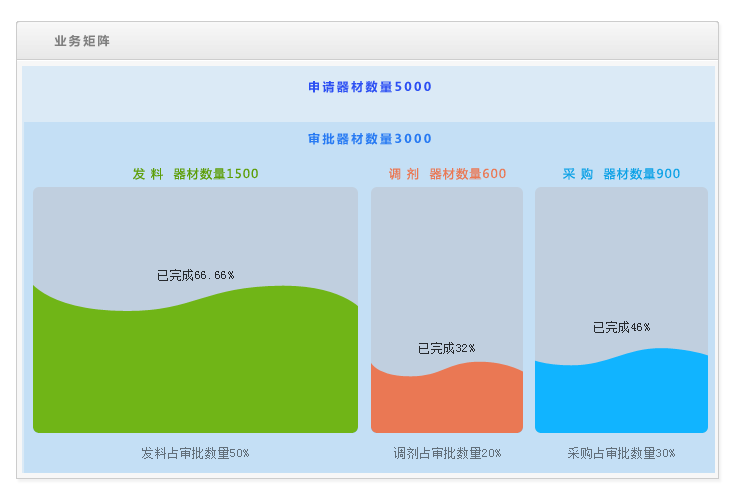
<style>
.page{position:relative;width:739px;height:500px;background:#c0cfdf}
.page>*{position:absolute;margin:0}
.t1{font:12px "MicrosoftYaHei-Bold";letter-spacing:0.2em;color:#7f7f7f}
.t2{font:12px "MicrosoftYaHei-Bold";letter-spacing:0.2em;color:#2c4ff3}
.t3{font:12px "MicrosoftYaHei-Bold";letter-spacing:0.2em;color:#277af3}
.t4{font:12px "MicrosoftYaHei";letter-spacing:0.1em;color:#5d9e09}
.t5{font:12px "MicrosoftYaHei";letter-spacing:0.1em;color:#ea7854}
.t6{font:12px "MicrosoftYaHei";letter-spacing:0.1em;color:#0ea2e6}
.t7{font:12px "SimSun";letter-spacing:0.05em;color:#26292d}
.t8{font:12px "SimSun";letter-spacing:0.05em;color:#626f7a}
</style>
<div class="page">
<p class="t1" style="left:54px;top:34px;width:56px;height:13px">业务矩阵</p>
<p class="t2" style="left:309px;top:80px;width:122px;height:13px">申请器材数量5000</p>
<p class="t3" style="left:308px;top:132px;width:123px;height:13px">审批器材数量3000</p>
<p class="t4" style="left:133px;top:167px;width:125px;height:13px">发 料  器材数量1500</p>
<p class="t5" style="left:389px;top:167px;width:117px;height:13px">调 剂  器材数量600</p>
<p class="t6" style="left:563px;top:168px;width:117px;height:12px">采 购  器材数量900</p>
<p class="t7" style="left:158px;top:269px;width:76px;height:12px">已完成66.66%</p>
<p class="t7" style="left:594px;top:321px;width:56px;height:12px">已完成46%</p>
<p class="t7" style="left:419px;top:342px;width:56px;height:12px">已完成32%</p>
<p class="t8" style="left:142px;top:447px;width:107px;height:12px">发料占审批数量50%</p>
<p class="t8" style="left:394px;top:447px;width:107px;height:12px">调剂占审批数量20%</p>
<p class="t8" style="left:568px;top:447px;width:107px;height:12px">采购占审批数量30%</p>
</div>
